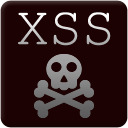
<style>
.page{position:relative;width:128px;height:128px;background:#1c0202}
.page>*{position:absolute;margin:0}
.t1{font:55px "CourierNewPSMT"}
</style>
<div class="page">
<p class="t1" style="left:18px;top:12px;width:93px;height:34px">XSS</p>
</div>
